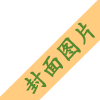
<style>
.page{position:relative;width:100px;height:100px;background:#ffffff}
.page>*{position:absolute;margin:0}
.t1{font:24px "AdobeKaitiStd-Regular";letter-spacing:-0.05em;color:#558b2f;font-weight:bold}
</style>
<div class="page">
<p class="t1" style="left:24px;top:22px;width:71px;height:72px;rotate:-45deg">封面图片</p>
</div>
